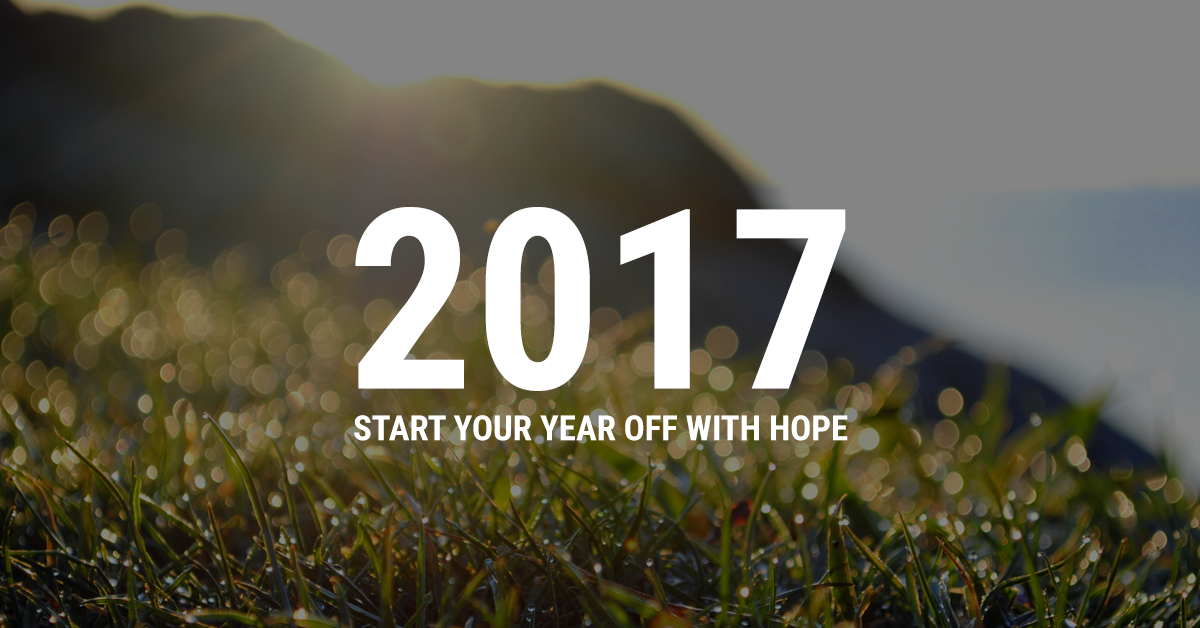
<style>
.page{position:relative;width:1200px;height:628px}
.page>*{position:absolute;margin:0}
.t1{font:251.5px "RobotoCondensed-Bold";color:#ffffff}
.t2{font:34.7px "RobotoCondensed-Bold";color:#ffffff}
</style>
<div class="page">
<p class="t1" style="left:355px;top:207px;width:491px;height:184px">2017</p>
<p class="t2" style="left:354px;top:415px;width:494px;height:26px">START YOUR YEAR OFF WITH HOPE</p>
</div>
